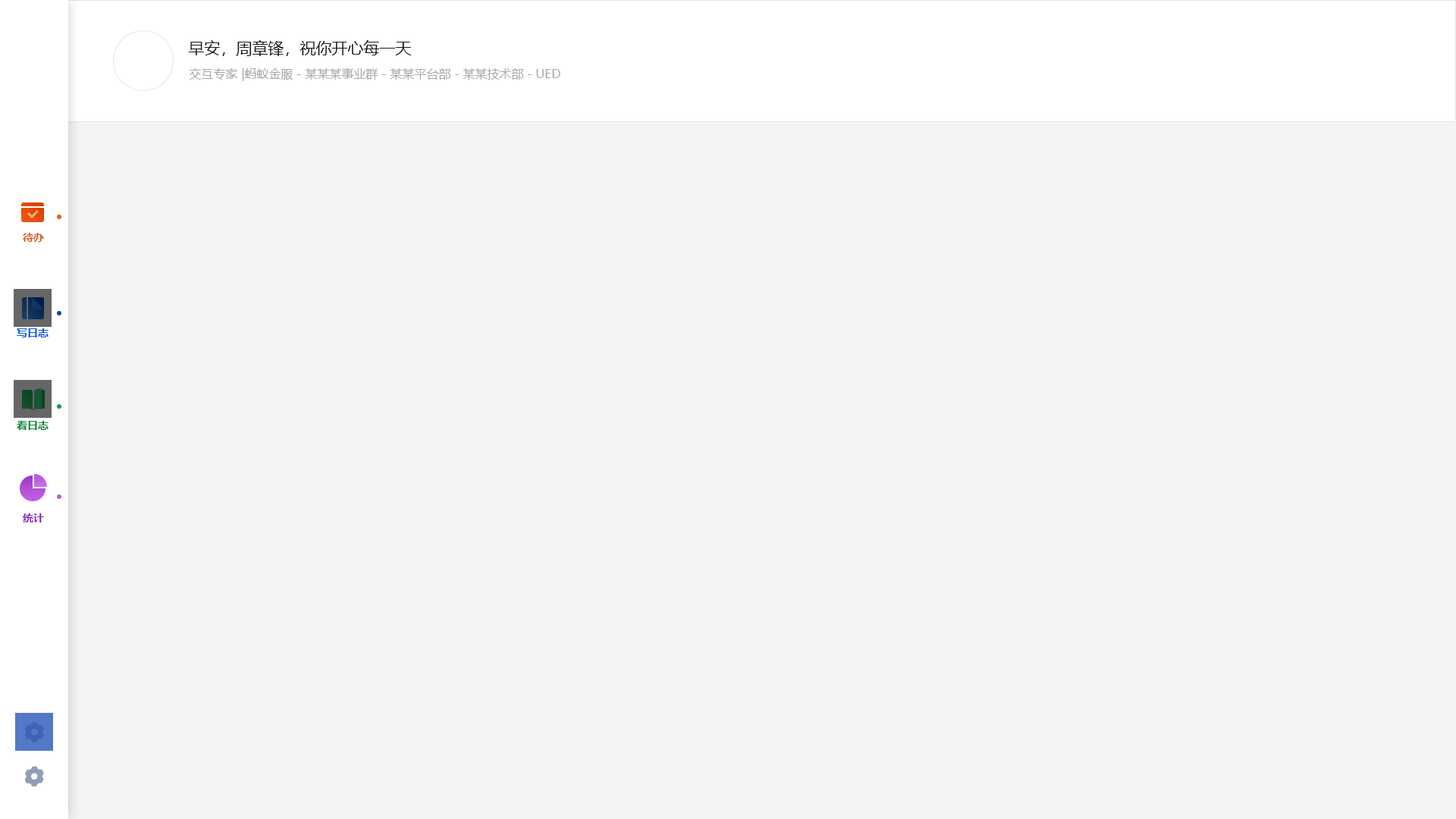
<style>
.page{position:relative;width:1456px;height:819px;background:#f3f3f3}
.page>*{position:absolute;margin:0}
.t1{font:15.9px "MicrosoftYaHei";color:#1a1a1a}
.t2{font:12.1px "MicrosoftYaHei";color:#a8a8a8}
.t3{font:10.6px "MicrosoftYaHei-Bold";color:#da5a22}
.t4{font:10.6px "MicrosoftYaHei-Bold";color:#0b59da}
.t5{font:10.6px "MicrosoftYaHei-Bold";color:#108340}
.t6{font:10.6px "MicrosoftYaHei-Bold";color:#8728b6}
</style>
<div class="page">
<p class="t1" style="left:188px;top:40px;width:223px;height:16px">早安，周章锋，祝你开心每一天</p>
<p class="t2" style="left:189px;top:68px;width:371px;height:13px">交互专家 |蚂蚁金服－某某某事业群－某某平台部－某某技术部－UED</p>
<p class="t3" style="left:23px;top:233px;width:21px;height:9px">待办</p>
<p class="t4" style="left:17px;top:328px;width:32px;height:9px">写日志</p>
<p class="t5" style="left:17px;top:421px;width:32px;height:9px">看日志</p>
<p class="t6" style="left:23px;top:513px;width:21px;height:9px">统计</p>
</div>
